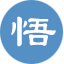
<style>
.page{position:relative;width:64px;height:64px;background:#5490c6}
.page>*{position:absolute;margin:0}
.t1{font:48px "LiSu";color:#fffffe}
</style>
<div class="page">
<p class="t1" style="left:11px;top:16px;width:45px;height:31px">悟</p>
</div>
